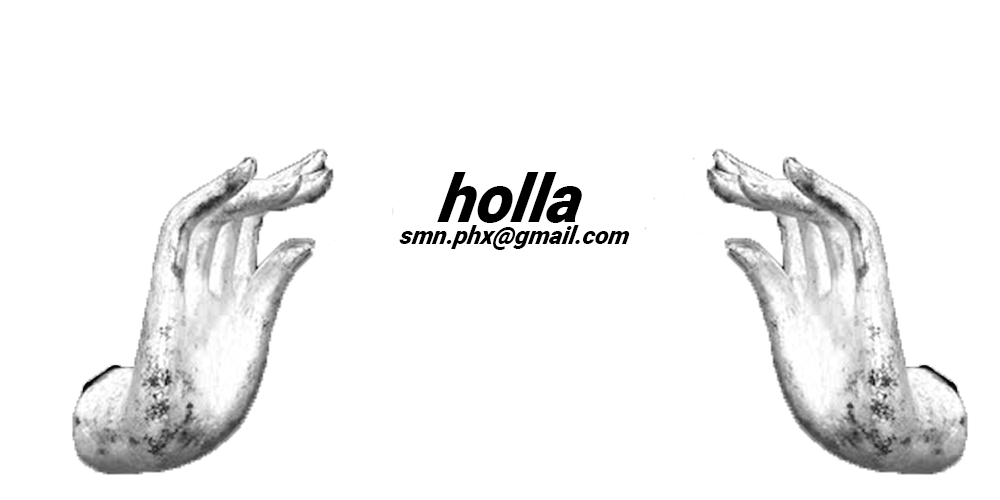
<style>
.page{position:relative;width:1000px;height:500px;background:#ffffff}
.page>*{position:absolute;margin:0}
.t1{font:66.7px "Roboto-BlackItalic";letter-spacing:-0.01em;color:#000000;font-style:italic}
.t2{font:25px "Roboto-BlackItalic";letter-spacing:-0.01em;color:#000000;font-style:italic}
</style>
<div class="page">
<p class="t1" style="left:437px;top:172px;width:145px;height:51px">holla</p>
<p class="t2" style="left:399px;top:225px;width:231px;height:25px">smn.phx@gmail.com</p>
</div>
